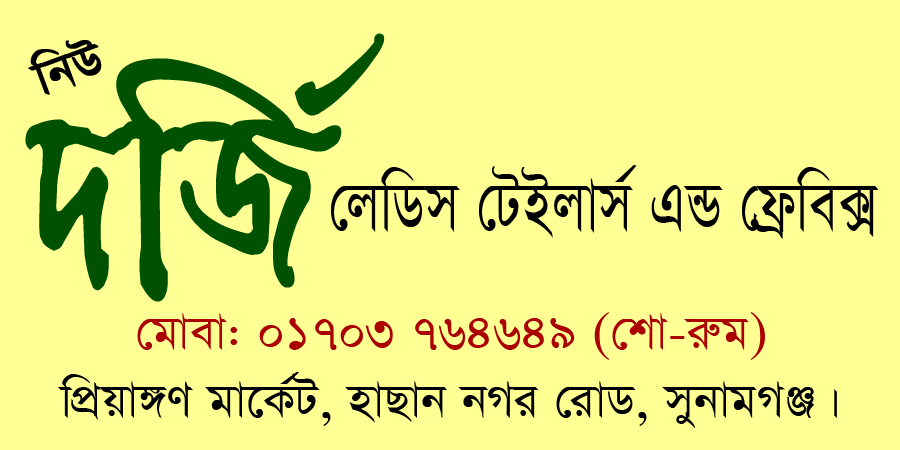
<style>
.page{position:relative;width:900px;height:450px;background:#ffff94}
.page>*{position:absolute;margin:0}
.t1{font:257px "Taposhi";color:#005200;font-weight:bold;scale:0.72 1}
.t2{font:56.4px "SutonnyMJ";color:#000000;font-weight:bold}
.t3{font:83px "SutonnyMJ";color:#000000;scale:0.78 1}
.t4{font:56.4px "SutonnyMJ";color:#000000}
.t5{font:56.4px "SutonnyMJ";color:#ab0000}
</style>
<div class="page">
<p class="t1" style="left:25px;top:33px;width:360px;height:269px">`wR©</p>
<p class="t2" style="left:28px;top:40px;width:74px;height:55px;rotate:-20deg">wbD</p>
<p class="t3" style="left:331px;top:165px;width:548px;height:74px">†jwWm †UBjvm© GÛ †d«we·</p>
<p class="t4" style="left:58px;top:312px;width:779px;height:116px;text-align:center"><span class="t5">†gvev: 01703 764649 (†kv-i“g)<br></span>wcÖqv½Y gv‡K©U, nvQvb bMi †ivW, mybvgMÄ|</p>
</div>
